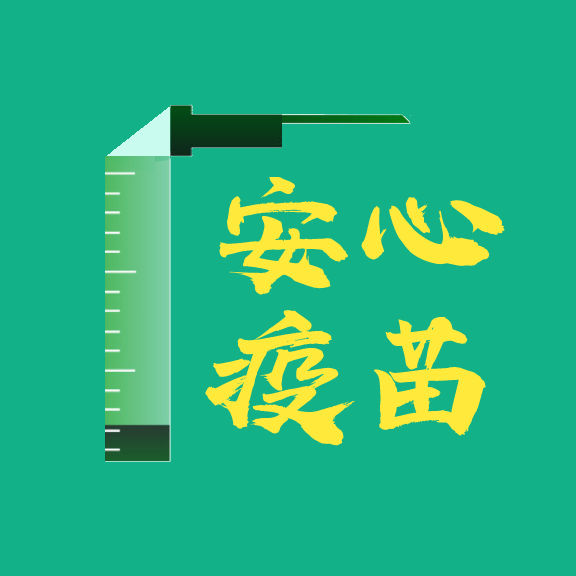
<style>
.page{position:relative;width:576px;height:576px;background:#13b188}
.page>*{position:absolute;margin:0}
.t1{font:142.7px "SSHuaFengShuFaTi";letter-spacing:-0.267em;color:#ffea3c;scale:1.24 1}
</style>
<div class="page">
<p class="t1" style="left:205px;top:176px;width:300px;height:270px">安心<br>疫苗</p>
</div>
